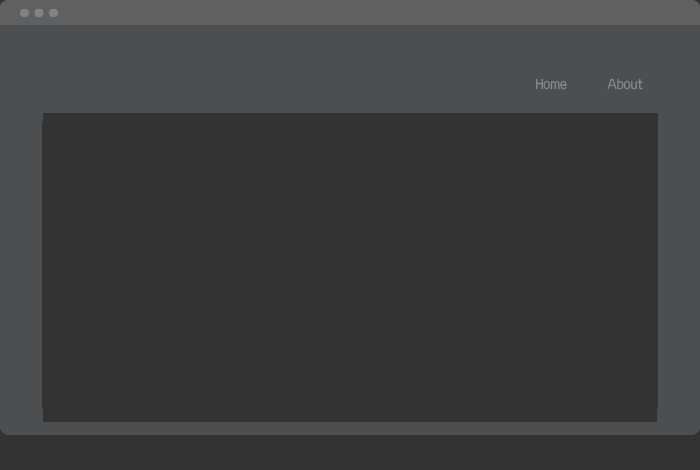
<style>
.page{position:relative;width:700px;height:470px;background:#333333}
.page>*{position:absolute;margin:0}
.t1{font:12px "KoreanNGL1-R";color:#8c8c8c}
</style>
<div class="page">
<p class="t1" style="left:536px;top:78px;width:107px;height:12px">Home  About</p>
</div>
